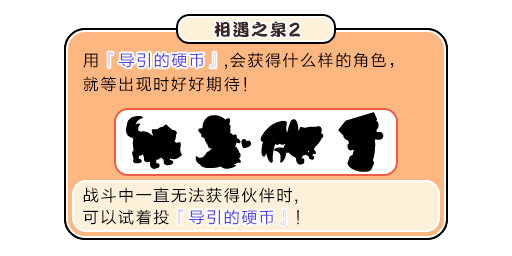
<style>
.page{position:relative;width:512px;height:256px;background:#ffffff}
.page>*{position:absolute;margin:0}
.t1{font:17px "DFPKanTingLiuW9";letter-spacing:0.1em;color:#3b2626}
.t2{font:20.4px "DFPKanTingLiuW9";letter-spacing:0.1em;color:#3b2626;scale:0.83 1}
.t3{font:16px/24px "FZLTHJW--GB1-0";letter-spacing:0.1em;color:#000000}
.t4{font:16px/24px "FZLTHJW--GB1-0";letter-spacing:0.1em;color:#5444ed}
.t5{font:16px "FZLTHJW--GB1-0";letter-spacing:0.1em;color:#5444ed}
.t6{font:16px/22px "FZLTHJW--GB1-0";letter-spacing:0.1em;color:#000000}
.t7{font:16px/20px "FZLTHJW--GB1-0";letter-spacing:0.1em;color:#5444ed}
</style>
<div class="page">
<p class="t1" style="left:214px;top:21px;width:86px;height:16px">相遇之泉<span class="t2">2</span></p>
<p class="t3" style="left:83px;top:52px;width:311px;height:40px">用<span class="t4">『导引的硬币』</span>,会获得什么样的角色，<br>就等出现时好好期待！</p>
<p class="t5" style="left:108px;top:52px;width:108px;height:16px">『导引的硬币』</p>
<p class="t6" style="left:83px;top:187px;width:216px;height:38px">战斗中一直无法获得伙伴时,<br>可以试着投<span class="t7">『导引的硬币』</span>！</p>
<p class="t5" style="left:178px;top:209px;width:108px;height:16px">『导引的硬币』</p>
</div>
